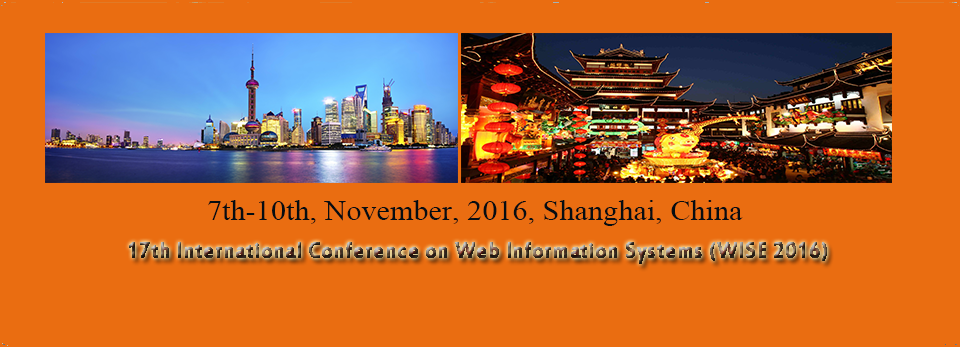
<style>
.page{position:relative;width:960px;height:347px;background:#ea6d11}
.page>*{position:absolute;margin:0}
.t1{font:28.3px "TimesNewRomanPSMT";color:#060d12;scale:1.07 1}
.t2{font:24px "EstrangeloEdessa";font-weight:bold;scale:0.87 1}
</style>
<div class="page">
<p class="t1" style="left:208px;top:200px;width:535px;height:26px">7th-10th, November, 2016, Shanghai, China</p>
<p class="t2" style="left:129px;top:242px;width:698px;height:22px">17th International Conference on Web Information Systems (WISE 2016)</p>
</div>
